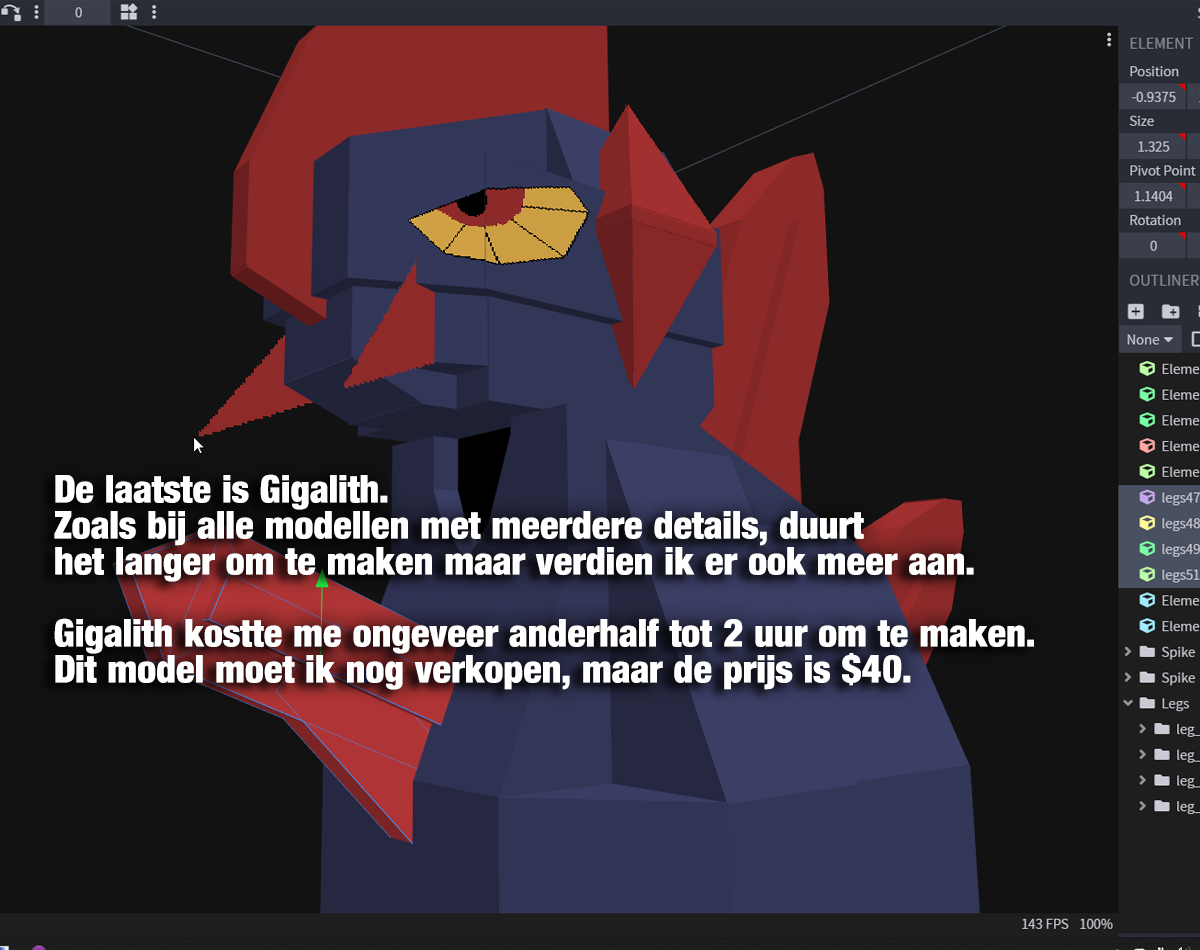
<style>
.page{position:relative;width:1200px;height:950px;background:#121212}
.page>*{position:absolute;margin:0}
.t1{font:38px/36px "Harvest";color:#ffffff}
</style>
<div class="page">
<p class="t1" style="left:54px;top:474px;width:980px;height:216px">De laatste is Gigalith.<br>Zoals bij alle modellen met meerdere details, duurt <br>het langer om te maken maar verdien ik er ook meer aan.<br><br>Gigalith kostte me ongeveer anderhalf tot 2 uur om te maken.<br>Dit model moet ik nog verkopen, maar de prijs is $40.</p>
</div>
